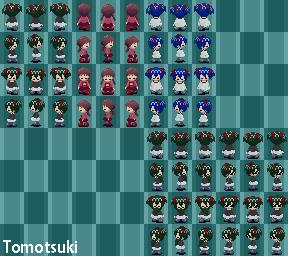
<style>
.page{position:relative;width:288px;height:256px}
.page>*{position:absolute;margin:0}
.t1{font:16px "KozGoPr6N-Bold";color:#ffffff}
</style>
<div class="page">
<p class="t1" style="left:3px;top:240px;width:74px;height:13px">Tomotsuki</p>
</div>
